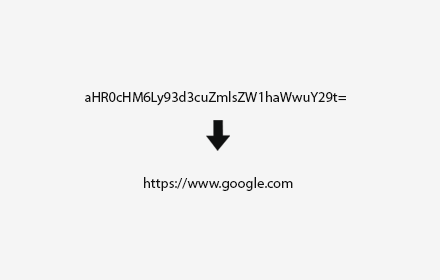
<style>
.page{position:relative;width:440px;height:280px;background:#f5f5f5}
.page>*{position:absolute;margin:0}
.t1{font:14.3px "MyriadPro-Regular";color:#111111}
</style>
<div class="page">
<p class="t1" style="left:85px;top:91px;width:261px;height:15px">aHR0cHM6Ly93d3cuZmlsZW1haWwuY29t=</p>
<p class="t1" style="left:144px;top:177px;width:149px;height:14px">https://www.google.com</p>
</div>
